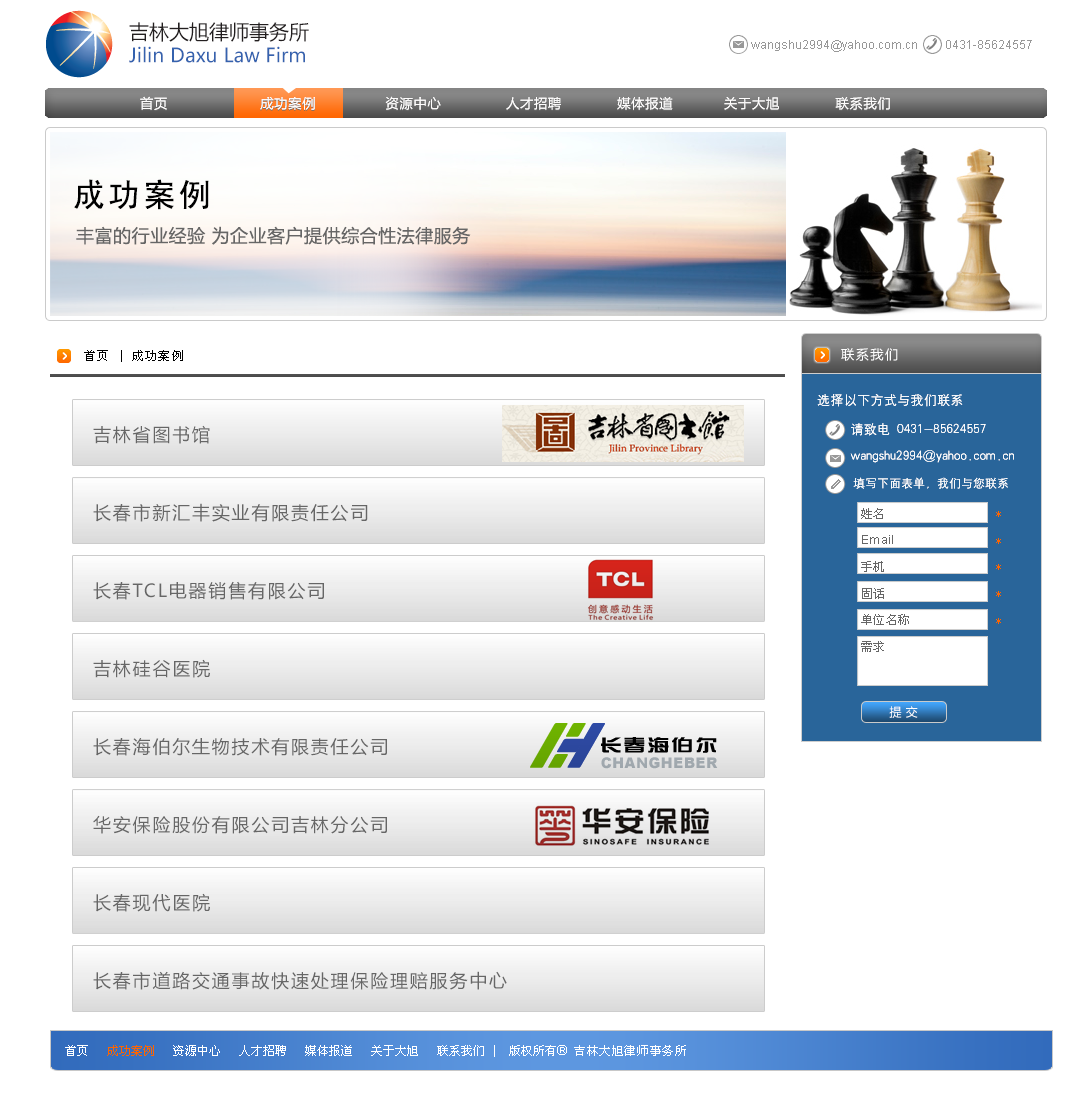
<style>
.page{position:relative;width:1075px;height:1094px;background:#ffffff}
.page>*{position:absolute;margin:0}
.t1{font:19.5px "MicrosoftYaHei";color:#3562ae}
.t2{font:20px "MicrosoftYaHei";color:#231f20}
.t3{font:12px "ArialMT";color:#989898}
.t4{font:13.3px "MicrosoftYaHei";letter-spacing:0.05em;color:#fffefe}
.t5{font:32px "SimHei";letter-spacing:0.1em;color:#000000}
.t6{font:18px "MicrosoftYaHei";letter-spacing:0.029em;color:#666666}
.t7{font:12px "SimSun";letter-spacing:0.1em;color:#000000}
.t8{font:13.3px "MicrosoftYaHei";letter-spacing:0.1em;color:#ffffff}
.t9{font:13.3px/29.3px "HYg2gj";color:#ffffff}
.t10{font:13.3px/26.7px "HYg2gj";color:#ffffff}
.t11{font:12px/26.7px "HYg2gj";color:#ffffff}
.t12{font:18px/78px "MicrosoftYaHei";letter-spacing:0.1em;color:#666666}
.t13{font:12px/26.7px "SimSun";letter-spacing:0.029em;color:#666666}
.t14{font:12px/26.7px "ArialMT";letter-spacing:0.029em;color:#666666}
.t15{font:12px/26.7px "SimSun";letter-spacing:0.029em;color:#ff6500}
.t16{font:12px "MicrosoftYaHei";letter-spacing:0.029em;color:#ffffff}
.t17{font:12px "SimSun";color:#ffffff}
.t18{font:12px "SimSun";color:#ff6500}
.t19{font:13.3px "ArialMT";color:#ffffff}
.t20{font:12px "SimSun";letter-spacing:0.05em;color:#ffffff}
</style>
<div class="page">
<p class="t1" style="left:129px;top:22px;width:180px;height:41px"><span class="t2">吉林大旭律师事务所<br></span>Jilin Daxu Law Firm</p>
<p class="t3" style="left:751px;top:40px;width:281px;height:12px">wangshu2994@yahoo.com.cn         0431-85624557</p>
<p class="t4" style="left:140px;top:96px;width:750px;height:14px">首页                    成功案例               资源中心              人才招聘            媒体报道           关于大旭            联系我们</p>
<p class="t4" style="left:140px;top:96px;width:750px;height:14px">首页                    成功案例               资源中心              人才招聘            媒体报道           关于大旭            联系我们</p>
<p class="t5" style="left:74px;top:179px;width:135px;height:31px">成功案例</p>
<p class="t6" style="left:76px;top:226px;width:395px;height:19px">丰富的行业经验 为企业客户提供综合性法律服务</p>
<p class="t7" style="left:84px;top:350px;width:99px;height:12px">首页 | 成功案例</p>
<p class="t8" style="left:841px;top:348px;width:57px;height:13px">联系我们</p>
<p class="t9" style="left:817px;top:394px;width:197px;height:95px">选择以下方式与我们联系<br>     请致电 0431-85624557<br><span class="t10">     wangshu2994@yahoo.com.cn<br></span><span class="t11">      填写下面表单，我们与您联系</span></p>
<p class="t9" style="left:817px;top:394px;width:197px;height:95px">选择以下方式与我们联系<br>     请致电 0431-85624557<br><span class="t10">     wangshu2994@yahoo.com.cn<br></span><span class="t11">      填写下面表单，我们与您联系</span></p>
<p class="t12" style="left:93px;top:425px;width:414px;height:565px">吉林省图书馆<br>长春市新汇丰实业有限责任公司<br>长春TCL电器销售有限公司<br>吉林硅谷医院<br>长春海伯尔生物技术有限责任公司<br>华安保险股份有限公司吉林分公司<br>长春现代医院<br>长春市道路交通事故快速处理保险理赔服务中心</p>
<p class="t13" style="left:861px;top:508px;width:48px;height:144px">姓名<br><span class="t14">Email<br></span>手机<br>固话<br>单位名称<br>需求</p>
<p class="t15" style="left:996px;top:511px;width:5px;height:113px">*<br>*<br>*<br>*<br>*</p>
<p class="t16" style="left:889px;top:706px;width:29px;height:12px">提 交</p>
<p class="t17" style="left:65px;top:1045px;width:621px;height:12px">首页   <span class="t18">成功案例 </span>  资源中心   人才招聘   媒体报道   关于大旭   联系我们 |  版权所有<span class="t19">® </span><span class="t20">吉林大旭律师事务所</span></p>
</div>
